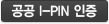
<style>
.page{position:relative;width:109px;height:24px}
.page>*{position:absolute;margin:0}
.t1{font:14px "YDIYGO340";color:#ffffff;scale:0.9 1}
</style>
<div class="page">
<p class="t1" style="left:11px;top:4px;width:86px;height:14px">공공 I-PIN 인증</p>
</div>
